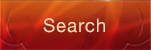
<style>
.page{position:relative;width:151px;height:50px}
.page>*{position:absolute;margin:0}
.t1{font:18.7px "HelveticaNeue";letter-spacing:0.05em;color:#f4dbb4}
</style>
<div class="page">
<p class="t1" style="left:43px;top:18px;width:62px;height:15px">Search</p>
</div>
